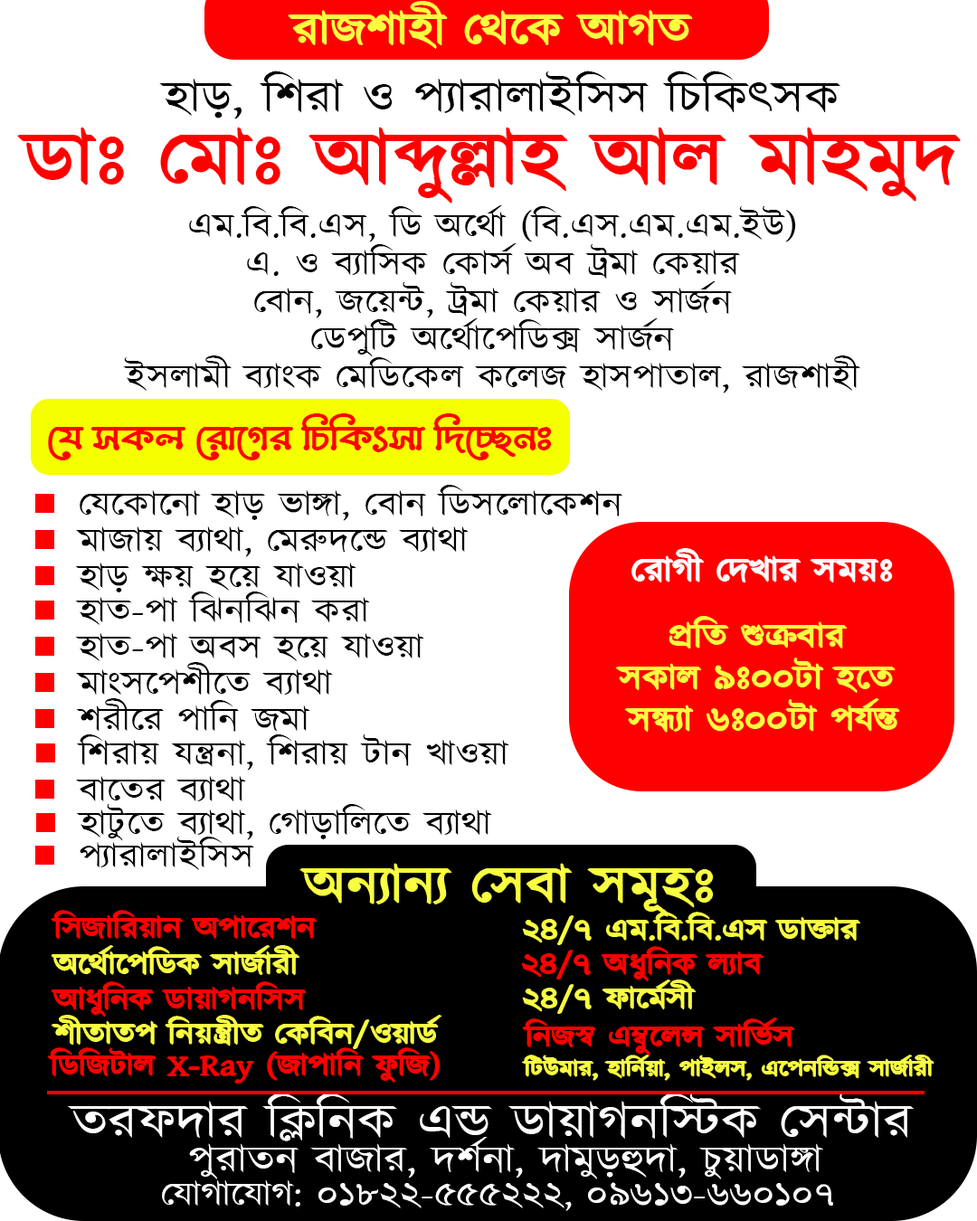
<style>
.page{position:relative;width:977px;height:1221px;background:#ffffff}
.page>*{position:absolute;margin:0}
.t1{font:45.2px "Kalpurush";color:#f8ff40;scale:1.16 1}
.t2{font:45.2px "Kalpurush";color:#000000;scale:1.16 1}
.t3{font:75.4px "Kalpurush";color:#ff0000;scale:1.16 1}
.t4{font:33.9px/37.7px "Kalpurush";color:#000000;scale:1.16 1}
.t5{font:37.7px "LiShohidBarkatUnicode";color:#ff0000;scale:1.16 1}
.t6{font:33.9px "Kalpurush";color:#000000;scale:1.16 1}
.t7{font:33.9px "Kalpurush";color:#ffffff;scale:1.16 1}
.t8{font:33.9px/41.4px "Kalpurush";color:#f8ff40;scale:1.16 1}
.t9{font:52.8px "Kalpurush";color:#f8ff40;scale:1.16 1}
.t10{font:30.1px "Kalpurush";color:#ff0000;scale:1.16 1}
.t11{font:30.1px "Kalpurush";color:#f8ff40;scale:1.16 1}
.t12{font:22.6px "Kalpurush";color:#f8ff40;scale:1.16 1}
.t13{font:49px "Kalpurush";color:#ffffff;scale:1.16 1}
.t14{font:37.7px "Kalpurush";color:#ffffff;scale:1.16 1}
.t15{font:33.9px "Kalpurush";color:#fffefe;scale:1.16 1}
</style>
<div class="page">
<p class="t1" style="left:288px;top:2px;width:404px;height:47px">রাজশাহী থেকে আগত</p>
<p class="t2" style="left:159px;top:71px;width:681px;height:48px">হাড়, শিরা ও প্যারালাইসিস চিকিৎসক</p>
<p class="t3" style="left:18px;top:128px;width:942px;height:75px">ডাঃ মোঃ আব্দুল্লাহ আল মাহমুদ</p>
<p class="t4" style="left:123px;top:205px;width:738px;height:188px;text-align:center">এম.বি.বি.এস, ডি অর্থো (বি.এস.এম.এম.ইউ)<br>এ. ও ব্যাসিক কোর্স অব ট্রমা কেয়ার<br>বোন, জয়েন্ট, ট্রমা কেয়ার ও সার্জন<br>ডেপুটি অর্থোপেডিক্স সার্জন<br>ইসলামী ব্যাংক মেডিকেল কলেজ হাসপাতাল, রাজশাহী</p>
<p class="t5" style="left:48px;top:413px;width:504px;height:47px">যে সকল রোগের চিকিৎসা দিচ্ছেনঃ</p>
<p class="t6" style="left:80px;top:485px;width:543px;height:36px">যেকোনো হাড় ভাঙ্গা, বোন ডিসলোকেশন</p>
<p class="t6" style="left:76px;top:526px;width:392px;height:31px">মাজায় ব্যাথা, মেরুদন্ডে ব্যাথা</p>
<p class="t7" style="left:632px;top:549px;width:260px;height:33px">রোগী দেখার সময়ঃ</p>
<p class="t6" style="left:75px;top:563px;width:281px;height:29px">হাড় ক্ষয় হয়ে যাওয়া</p>
<p class="t6" style="left:75px;top:591px;width:295px;height:35px">হাত-পা ঝিনঝিন করা</p>
<p class="t8" style="left:616px;top:617px;width:283px;height:115px;text-align:center">প্রতি শুক্রবার <br>সকাল ৯ঃ০০টা হতে <br>সন্ধ্যা ৬ঃ০০টা পর্যন্ত</p>
<p class="t6" style="left:75px;top:633px;width:349px;height:29px">হাত-পা অবস হয়ে যাওয়া</p>
<p class="t6" style="left:76px;top:662px;width:257px;height:33px">মাংসপেশীতে ব্যাথা</p>
<p class="t6" style="left:76px;top:698px;width:234px;height:34px">শরীরে পানি জমা</p>
<p class="t6" style="left:76px;top:734px;width:433px;height:37px">শিরায় যন্ত্রনা, শিরায় টান খাওয়া</p>
<p class="t6" style="left:76px;top:776px;width:170px;height:26px">বাতের ব্যাথা</p>
<p class="t6" style="left:76px;top:804px;width:416px;height:37px">হাটুতে ব্যাথা, গোড়ালিতে ব্যাথা</p>
<p class="t6" style="left:80px;top:837px;width:174px;height:34px">প্যারালাইসিস</p>
<p class="t9" style="left:300px;top:864px;width:413px;height:52px">অন্যান্য সেবা সমূহঃ</p>
<p class="t10" style="left:52px;top:911px;width:265px;height:28px">সিজারিয়ান অপারেশন</p>
<p class="t11" style="left:523px;top:912px;width:337px;height:32px">২৪/৭ এম.বি.বি.এস ডাক্তার</p>
<p class="t11" style="left:52px;top:946px;width:247px;height:29px">অর্থোপেডিক সার্জারী</p>
<p class="t10" style="left:522px;top:947px;width:241px;height:34px">২৪/৭ অধুনিক ল্যাব</p>
<p class="t10" style="left:52px;top:982px;width:254px;height:34px">আধুনিক ডায়াগনসিস</p>
<p class="t11" style="left:523px;top:980px;width:172px;height:33px">২৪/৭ ফার্মেসী</p>
<p class="t11" style="left:52px;top:1016px;width:389px;height:32px">শীতাতপ নিয়ন্ত্রীত কেবিন/ওয়ার্ড</p>
<p class="t10" style="left:523px;top:1018px;width:271px;height:37px">নিজস্ব এম্বুলেন্স সার্ভিস</p>
<p class="t10" style="left:48px;top:1048px;width:392px;height:35px">ডিজিটাল X-Ray (জাপানি ফুজি)</p>
<p class="t12" style="left:522px;top:1055px;width:411px;height:25px">টিউমার, হার্নিয়া, পাইলস, এপেনন্ডিক্স সার্জারী</p>
<p class="t13" style="left:68px;top:1092px;width:845px;height:49px">তরফদার ক্লিনিক এন্ড ডায়াগনস্টিক সেন্টার</p>
<p class="t14" style="left:189px;top:1137px;width:634px;height:42px">পুরাতন বাজার, দর্শনা, দামুড়হুদা, চুয়াডাঙ্গা</p>
<p class="t15" style="left:162px;top:1180px;width:671px;height:31px">যোগাযোগ: ০১৮২২-৫৫৫২২২, ০৯৬১৩-৬৬০১০৭</p>
</div>
